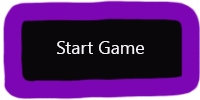
<style>
.page{position:relative;width:200px;height:100px;background:#09070a}
.page>*{position:absolute;margin:0}
.t1{font:18px "Gadugi";color:#faf5fc}
</style>
<div class="page">
<p class="t1" style="left:57px;top:41px;width:87px;height:13px">Start Game</p>
</div>
